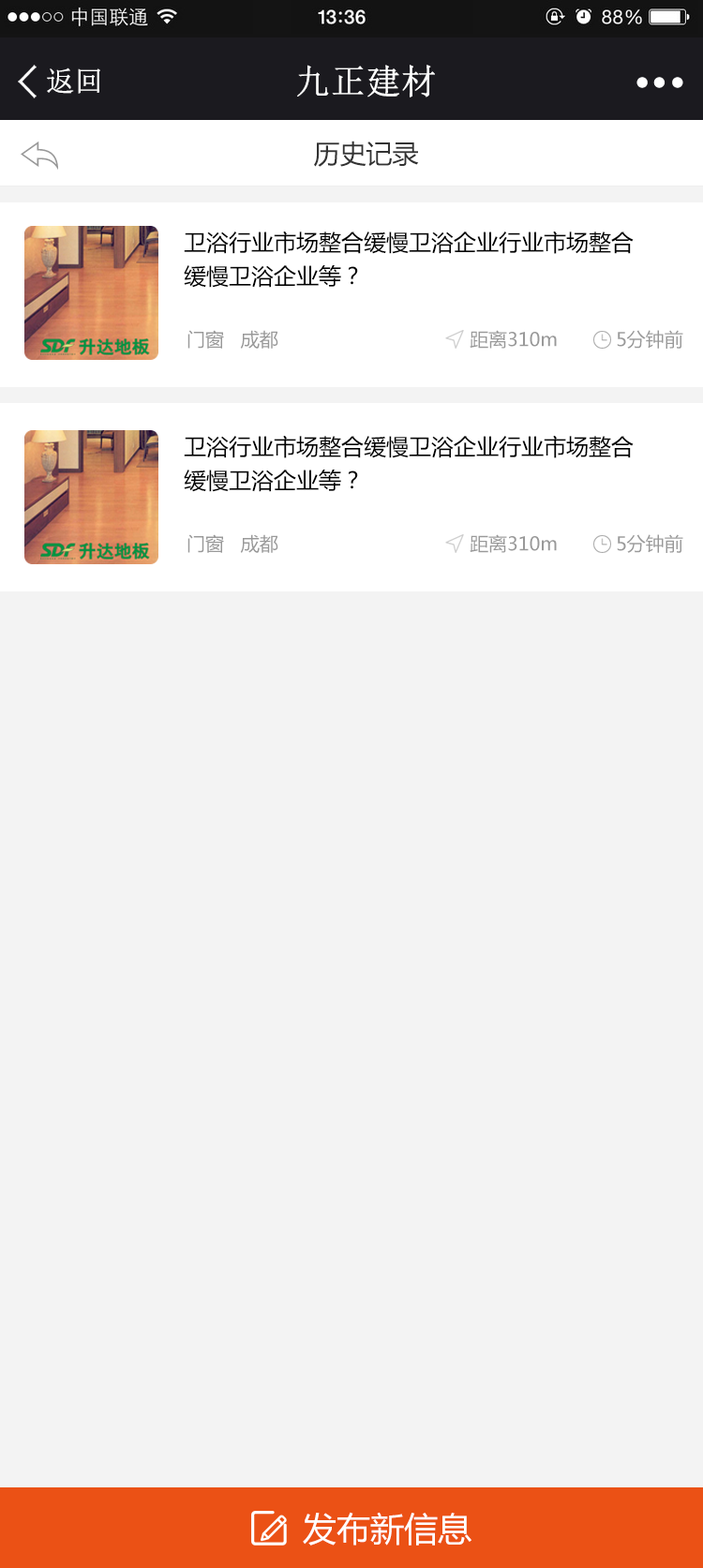
<style>
.page{position:relative;width:703px;height:1568px;background:#f3f3f3}
.page>*{position:absolute;margin:0}
.t1{font:34.4px "NSimSun";color:#ffffff;font-weight:bold}
.t2{font:28.1px "NSimSun";color:#ffffff;font-weight:bold}
.t3{font:26.2px "MicrosoftYaHei";color:#333333}
.t4{font:26.2px "MicrosoftYaHei";color:#333333;font-weight:bold}
.t5{font:22.5px/33.7px "MicrosoftYaHei";color:#000000}
.t6{font:18.7px "MicrosoftYaHei";color:#999999}
.t7{font:33.7px "MicrosoftYaHei";color:#ffffff}
</style>
<div class="page">
<p class="t1" style="left:297px;top:65px;width:138px;height:32px">九正建材</p>
<p class="t2" style="left:47px;top:67px;width:53px;height:27px">返回</p>
<p class="t3" style="left:314px;top:141px;width:105px;height:26px"><span class="t4"><br></span>历史记录</p>
<p class="t5" style="left:184px;top:231px;width:450px;height:57px">卫浴行业市场整合缓慢卫浴企业行业市场整合<br>缓慢卫浴企业等？</p>
<p class="t6" style="left:187px;top:330px;width:91px;height:19px">门窗   成都</p>
<p class="t6" style="left:470px;top:330px;width:87px;height:19px">距离310m</p>
<p class="t6" style="left:617px;top:330px;width:66px;height:19px">5分钟前</p>
<p class="t5" style="left:184px;top:435px;width:450px;height:57px">卫浴行业市场整合缓慢卫浴企业行业市场整合<br>缓慢卫浴企业等？</p>
<p class="t6" style="left:187px;top:534px;width:91px;height:19px">门窗   成都</p>
<p class="t6" style="left:470px;top:534px;width:87px;height:19px">距离310m</p>
<p class="t6" style="left:617px;top:534px;width:66px;height:19px">5分钟前</p>
<p class="t7" style="left:303px;top:1512px;width:168px;height:34px">发布新信息</p>
</div>
